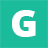
<style>
.page{position:relative;width:48px;height:48px;background:#1abc9c}
.page>*{position:absolute;margin:0}
.t1{font:37.5px "OpenSans-Extrabold";color:#ffffff}
</style>
<div class="page">
<p class="t1" style="left:12px;top:10px;width:24px;height:27px">G</p>
</div>
